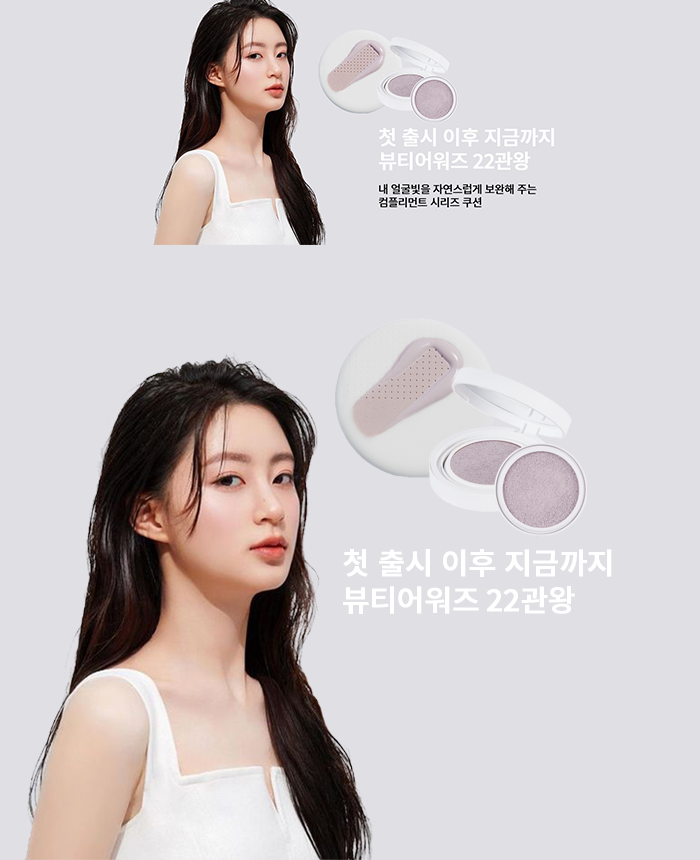
<style>
.page{position:relative;width:700px;height:860px;background:#e0dfe4}
.page>*{position:absolute;margin:0}
.t1{font:30px/37px "NotoSansKR-Medium";letter-spacing:-0.03em;color:#ffffff;font-weight:bold}
</style>
<div class="page">
<p class="t1" style="left:343px;top:549px;width:269px;height:65px">첫 출시 이후 지금까지<br>뷰티어워즈 22관왕</p>
</div>
